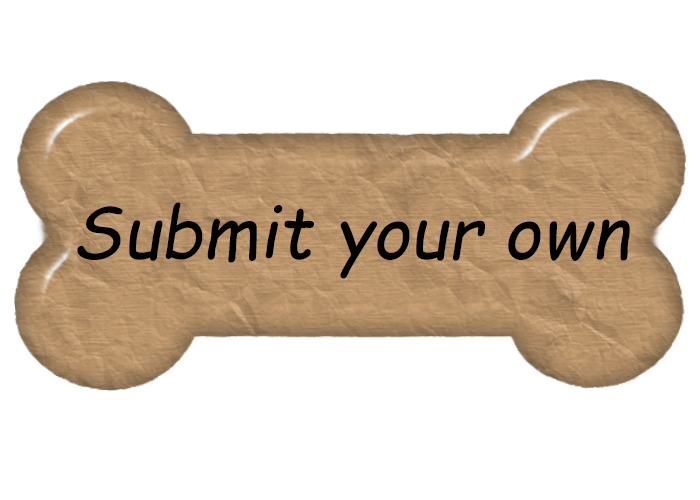
<style>
.page{position:relative;width:700px;height:500px;background:#ffffff}
.page>*{position:absolute;margin:0}
.t1{font:72.2px "ComicSansMS-Italic";color:#000000}
</style>
<div class="page">
<p class="t1" style="left:77px;top:202px;width:553px;height:77px">Submit your own</p>
</div>
